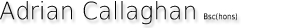
<style>
.page{position:relative;width:285px;height:28px;background:#ffffff}
.page>*{position:absolute;margin:0}
.t1{font:24px "DejaVuSans-ExtraLight";color:#050505;scale:0.97 1}
.t2{font:8px "DejaVuSansCondensed";color:#050505;scale:0.97 1}
</style>
<div class="page">
<p class="t1" style="left:0px;top:1px;width:237px;height:24px">Adrian Callaghan <span class="t2">Bsc(hons)</span></p>
</div>
